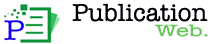
<style>
.page{position:relative;width:213px;height:44px;background:#ffffff}
.page>*{position:absolute;margin:0}
.t1{font:25px "AmericanTypewriter";color:#010007}
.t2{font:16.9px "AmericanTypewriter";color:#66c759;scale:1.45 1}
</style>
<div class="page">
<p class="t1" style="left:72px;top:3px;width:136px;height:19px">Publication</p>
<p class="t2" style="left:154px;top:24px;width:54px;height:13px">Web.</p>
</div>
